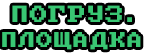
<style>
.page{position:relative;width:144px;height:56px;background:#000000}
.page>*{position:absolute;margin:0}
.t1{font:18.4px "PxPlus_IBM_BIOS";letter-spacing:0.075em;color:#39c773}
.t2{font:17px "PxPlus_IBM_BIOS";letter-spacing:0.075em;color:#39c773}
</style>
<div class="page">
<p class="t1" style="left:12px;top:5px;width:120px;height:17px">ПОГРУЗ.</p>
<p class="t2" style="left:2px;top:32px;width:139px;height:18px">ПЛОЩАДКА</p>
</div>
